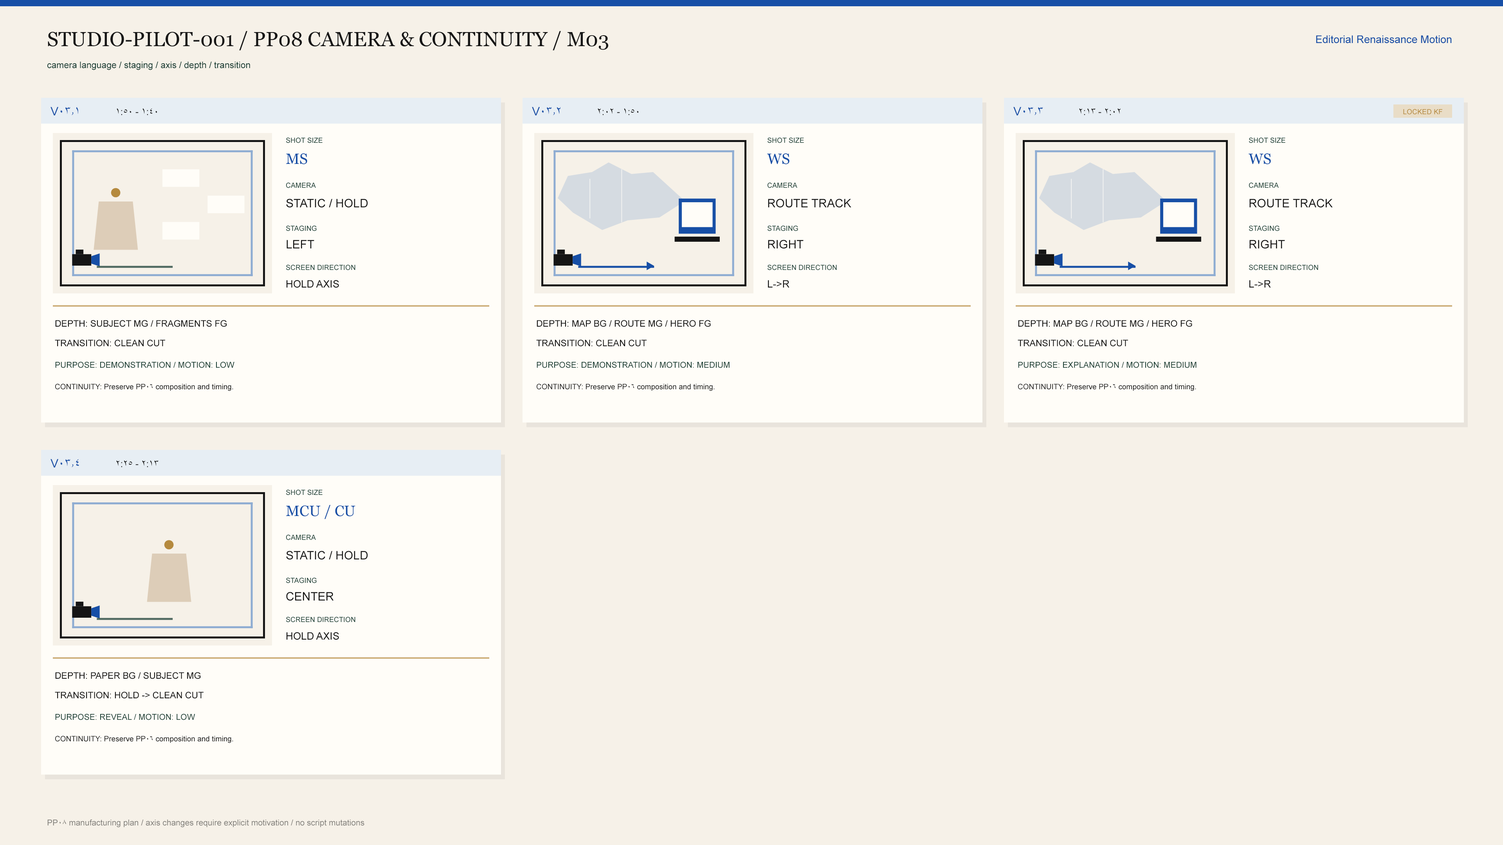
<style>
.page{position:relative;width:1503px;height:845px;background:#f6f1e8}
.page>*{position:absolute;margin:0}
.t1{font:20.3px "Georgia";color:#151515}
.t2{font:10.6px "ArialMT";color:#174fa6}
.t3{font:9px "ArialMT";color:#173c32}
.t4{font:11.7px "ArialMT";color:#174fa6}
.t5{font:9.4px "ArialMT";color:#151515}
.t6{font:7px "ArialMT";color:#b58a3e}
.t7{font:7px "ArialMT";color:#173c32}
.t8{font:14.9px "Georgia";color:#174fa6}
.t9{font:21.5px "ArialMT";color:#b58a3e}
.t10{font:11.7px "ArialMT";color:#151515}
.t11{font:10.2px "ArialMT";color:#151515}
.t12{font:9px "ArialMT";color:#151515}
.t13{font:8.2px "ArialMT";color:#173c32}
.t14{font:7.4px "ArialMT";color:#151515}
.t15{font:8.2px "ArialMT";color:#817f7a}
</style>
<div class="page">
<p class="t1" style="left:48px;top:31px;width:560px;height:19px">STUDIO-PILOT-001 / PP08 CAMERA &amp; CONTINUITY / M03</p>
<p class="t2" style="left:1316px;top:35px;width:135px;height:8px">Editorial Renaissance Motion</p>
<p class="t3" style="left:47px;top:61px;width:203px;height:9px">camera language / staging / axis / depth / transition</p>
<p class="t4" style="left:50px;top:107px;width:28px;height:8px">V03.1</p>
<p class="t5" style="left:117px;top:108px;width:40px;height:7px">1:40 - 1:50</p>
<p class="t4" style="left:532px;top:107px;width:28px;height:8px">V03.2</p>
<p class="t5" style="left:598px;top:108px;width:41px;height:7px">1:50 - 2:02</p>
<p class="t4" style="left:1013px;top:107px;width:29px;height:8px">V03.3</p>
<p class="t5" style="left:1079px;top:108px;width:41px;height:7px">2:02 - 2:13</p>
<p class="t6" style="left:1403px;top:109px;width:39px;height:6px">LOCKED KF</p>
<p class="t7" style="left:286px;top:137px;width:36px;height:6px">SHOT SIZE</p>
<p class="t7" style="left:767px;top:137px;width:37px;height:6px">SHOT SIZE</p>
<p class="t7" style="left:1249px;top:137px;width:36px;height:6px">SHOT SIZE</p>
<p class="t8" style="left:286px;top:153px;width:21px;height:11px">MS</p>
<p class="t8" style="left:767px;top:153px;width:22px;height:11px">WS</p>
<p class="t8" style="left:1248px;top:153px;width:23px;height:11px">WS</p>
<p class="t7" style="left:286px;top:182px;width:30px;height:6px">CAMERA</p>
<p class="t7" style="left:767px;top:182px;width:30px;height:6px">CAMERA</p>
<p class="t7" style="left:1249px;top:182px;width:29px;height:6px">CAMERA</p>
<p class="t9" style="left:111px;top:188px;width:10px;height:10px">●</p>
<p class="t10" style="left:286px;top:199px;width:82px;height:9px">STATIC / HOLD</p>
<p class="t10" style="left:768px;top:199px;width:83px;height:9px">ROUTE TRACK</p>
<p class="t10" style="left:1249px;top:199px;width:83px;height:9px">ROUTE TRACK</p>
<p class="t7" style="left:286px;top:225px;width:31px;height:6px">STAGING</p>
<p class="t7" style="left:767px;top:225px;width:31px;height:6px">STAGING</p>
<p class="t7" style="left:1249px;top:225px;width:30px;height:6px">STAGING</p>
<p class="t10" style="left:286px;top:240px;width:28px;height:8px">LEFT</p>
<p class="t10" style="left:768px;top:240px;width:35px;height:9px">RIGHT</p>
<p class="t10" style="left:1249px;top:240px;width:36px;height:9px">RIGHT</p>
<p class="t7" style="left:286px;top:265px;width:69px;height:5px">SCREEN DIRECTION</p>
<p class="t7" style="left:767px;top:265px;width:70px;height:5px">SCREEN DIRECTION</p>
<p class="t7" style="left:1249px;top:265px;width:69px;height:5px">SCREEN DIRECTION</p>
<p class="t11" style="left:286px;top:280px;width:53px;height:8px">HOLD AXIS</p>
<p class="t11" style="left:768px;top:280px;width:21px;height:8px">L-&gt;R</p>
<p class="t11" style="left:1249px;top:280px;width:22px;height:8px">L-&gt;R</p>
<p class="t12" style="left:55px;top:320px;width:172px;height:7px">DEPTH: SUBJECT MG / FRAGMENTS FG</p>
<p class="t12" style="left:536px;top:320px;width:175px;height:7px">DEPTH: MAP BG / ROUTE MG / HERO FG</p>
<p class="t12" style="left:1018px;top:320px;width:174px;height:7px">DEPTH: MAP BG / ROUTE MG / HERO FG</p>
<p class="t12" style="left:55px;top:340px;width:110px;height:7px">TRANSITION: CLEAN CUT</p>
<p class="t12" style="left:536px;top:340px;width:110px;height:7px">TRANSITION: CLEAN CUT</p>
<p class="t12" style="left:1017px;top:340px;width:111px;height:7px">TRANSITION: CLEAN CUT</p>
<p class="t13" style="left:55px;top:362px;width:179px;height:6px">PURPOSE: DEMONSTRATION / MOTION: LOW</p>
<p class="t13" style="left:536px;top:362px;width:193px;height:6px">PURPOSE: DEMONSTRATION / MOTION: MEDIUM</p>
<p class="t13" style="left:1018px;top:362px;width:178px;height:6px">PURPOSE: EXPLANATION / MOTION: MEDIUM</p>
<p class="t14" style="left:55px;top:384px;width:178px;height:7px">CONTINUITY: Preserve PP06 composition and timing.</p>
<p class="t14" style="left:536px;top:384px;width:179px;height:7px">CONTINUITY: Preserve PP06 composition and timing.</p>
<p class="t14" style="left:1018px;top:384px;width:178px;height:7px">CONTINUITY: Preserve PP06 composition and timing.</p>
<p class="t4" style="left:50px;top:459px;width:29px;height:9px">V03.4</p>
<p class="t5" style="left:116px;top:460px;width:42px;height:7px">2:13 - 2:25</p>
<p class="t7" style="left:286px;top:490px;width:36px;height:5px">SHOT SIZE</p>
<p class="t8" style="left:286px;top:505px;width:69px;height:14px">MCU / CU</p>
<p class="t9" style="left:164px;top:540px;width:10px;height:10px">●</p>
<p class="t7" style="left:286px;top:535px;width:30px;height:5px">CAMERA</p>
<p class="t10" style="left:286px;top:551px;width:82px;height:9px">STATIC / HOLD</p>
<p class="t7" style="left:286px;top:578px;width:31px;height:5px">STAGING</p>
<p class="t10" style="left:286px;top:592px;width:47px;height:9px">CENTER</p>
<p class="t7" style="left:286px;top:617px;width:69px;height:6px">SCREEN DIRECTION</p>
<p class="t11" style="left:286px;top:632px;width:53px;height:8px">HOLD AXIS</p>
<p class="t12" style="left:55px;top:672px;width:146px;height:7px">DEPTH: PAPER BG / SUBJECT MG</p>
<p class="t12" style="left:55px;top:692px;width:148px;height:7px">TRANSITION: HOLD -&gt; CLEAN CUT</p>
<p class="t13" style="left:55px;top:714px;width:140px;height:6px">PURPOSE: REVEAL / MOTION: LOW</p>
<p class="t14" style="left:55px;top:736px;width:178px;height:7px">CONTINUITY: Preserve PP06 composition and timing.</p>
<p class="t15" style="left:47px;top:819px;width:317px;height:9px">PP08 manufacturing plan / axis changes require explicit motivation / no script mutations</p>
</div>
